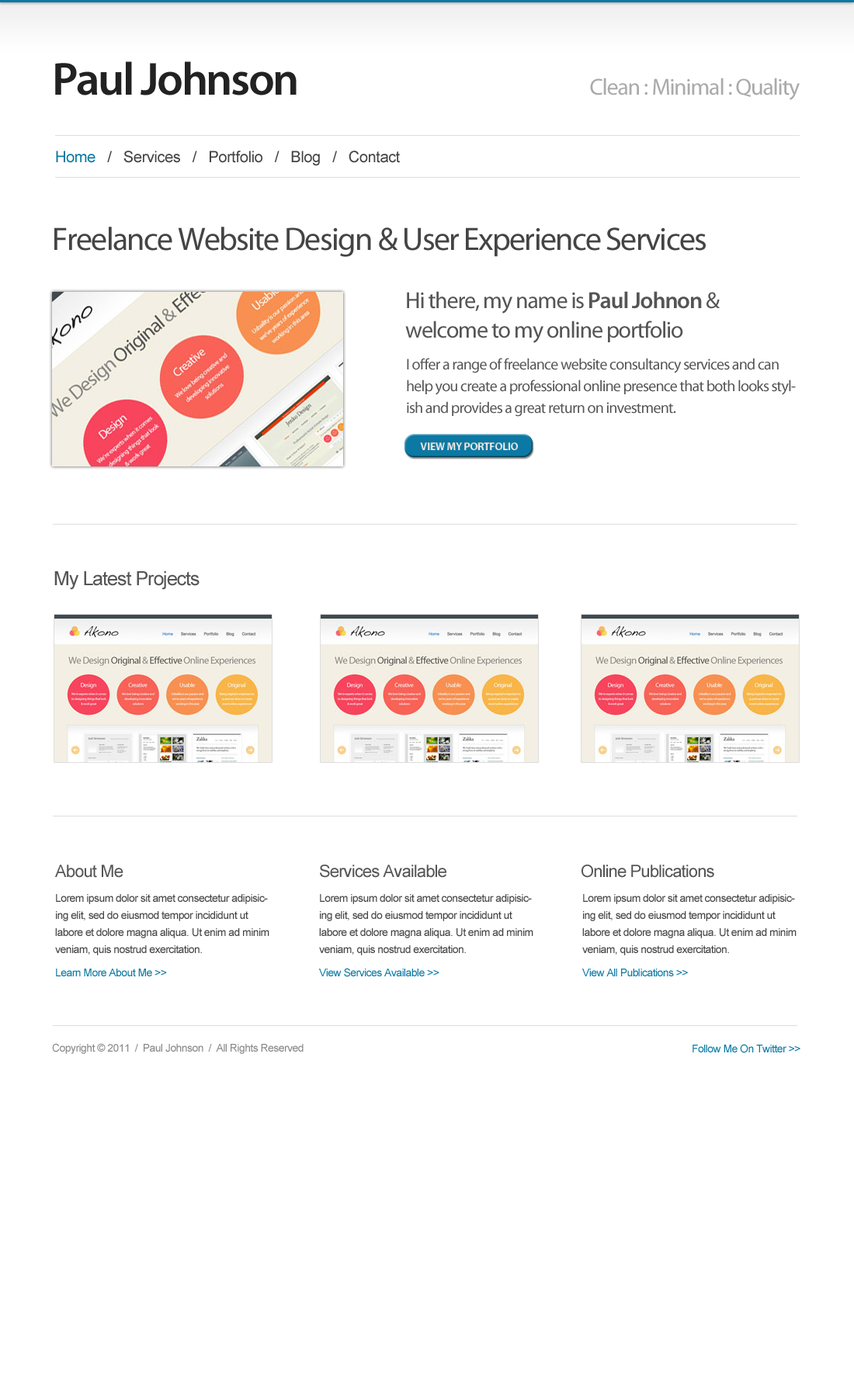
<style>
.page{position:relative;width:854px;height:1397px;background:#ffffff}
.page>*{position:absolute;margin:0}
.t1{font:46.6px "MyriadPro-Semibold";letter-spacing:-0.04em;color:#222222}
.t2{font:23.3px "MyriadPro-Regular";letter-spacing:-0.04em;color:#aaaaaa}
.t3{font:15.5px "ArialMT";letter-spacing:-0.02em;color:#444444}
.t4{font:15.5px "ArialMT";letter-spacing:-0.02em;color:#0b79a3}
.t5{font:32.6px "MyriadPro-Regular";letter-spacing:-0.04em;color:#444444}
.t6{font:32.6px "MyriadPro-Regular";color:#444444}
.t7{font:23.3px/29.5px "MyriadPro-Regular";letter-spacing:-0.04em;color:#555555}
.t8{font:23.3px/29.5px "MyriadPro-Semibold";letter-spacing:-0.04em;color:#555555}
.t9{font:15.5px/21.7px "MyriadPro-Regular";letter-spacing:-0.04em;color:#555555}
.t10{font:10.9px "MyriadPro-Bold";letter-spacing:-0.025em;color:#dfdfdf;text-transform:uppercase}
.t11{font:19.4px "ArialMT";letter-spacing:-0.04em;color:#555555}
.t12{font:17.1px "ArialMT";letter-spacing:-0.04em;color:#555555}
.t13{font:10.9px/17.1px "ArialMT";letter-spacing:-0.04em;color:#444444}
.t14{font:10.9px/23.3px "ArialMT";letter-spacing:-0.04em;color:#0b79a3}
.t15{font:10.9px "ArialMT";letter-spacing:-0.04em;color:#888888}
.t16{font:10.9px "ArialMT";letter-spacing:-0.04em;color:#0b79a3}
</style>
<div class="page">
<p class="t1" style="left:55px;top:61px;width:241px;height:34px">Paul Johnson</p>
<p class="t2" style="left:590px;top:78px;width:209px;height:22px">Clean : Minimal : Quality</p>
<p class="t3" style="left:56px;top:151px;width:344px;height:15px"><span class="t4">Home   </span>/   Services   /   Portfolio   /   Blog   /   Contact</p>
<p class="t5" style="left:54px;top:227px;width:651px;height:30px">Freelance Website Desig<span class="t6">n</span> &amp; User Experience Services</p>
<p class="t7" style="left:405px;top:291px;width:314px;height:52px">Hi there, my name is <span class="t8">Paul Johnon</span> &amp; <br>welcome to my online portfolio</p>
<p class="t9" style="left:407px;top:358px;width:388px;height:59px">I offer a range of freelance website consultancy services and can help you create a professional online presence that both looks stylish and provides a great return on investment.</p>
<p class="t10" style="left:420px;top:442px;width:98px;height:8px">VIEW MY PORTFOLIO</p>
<p class="t11" style="left:54px;top:571px;width:145px;height:19px">My Latest Projects</p>
<p class="t12" style="left:55px;top:865px;width:68px;height:13px">About Me</p>
<p class="t12" style="left:320px;top:865px;width:126px;height:13px">Services Available</p>
<p class="t12" style="left:581px;top:865px;width:133px;height:13px">Online Publications</p>
<p class="t13" style="left:55px;top:894px;width:214px;height:82px">Lorem ipsum dolor sit amet consectetur adipisicing elit, sed do eiusmod tempor incididunt ut labore et dolore magna aliqua. Ut enim ad minim veniam, quis nostrud exercitation.<br><span class="t14">Learn More About Me &gt;&gt;</span></p>
<p class="t13" style="left:319px;top:894px;width:214px;height:83px">Lorem ipsum dolor sit amet consectetur adipisicing elit, sed do eiusmod tempor incididunt ut labore et dolore magna aliqua. Ut enim ad minim veniam, quis nostrud exercitation.<br><span class="t14">View Services Available &gt;&gt;</span></p>
<p class="t13" style="left:582px;top:894px;width:214px;height:82px">Lorem ipsum dolor sit amet consectetur adipisicing elit, sed do eiusmod tempor incididunt ut labore et dolore magna aliqua. Ut enim ad minim veniam, quis nostrud exercitation.<br><span class="t14">View All Publications &gt;&gt;</span></p>
<p class="t15" style="left:52px;top:1043px;width:251px;height:11px">Copyright © 2011  /  Paul Johnson  /  All Rights Reserved</p>
<p class="t16" style="left:692px;top:1044px;width:108px;height:9px">Follow Me On Twitter &gt;&gt;</p>
</div>
